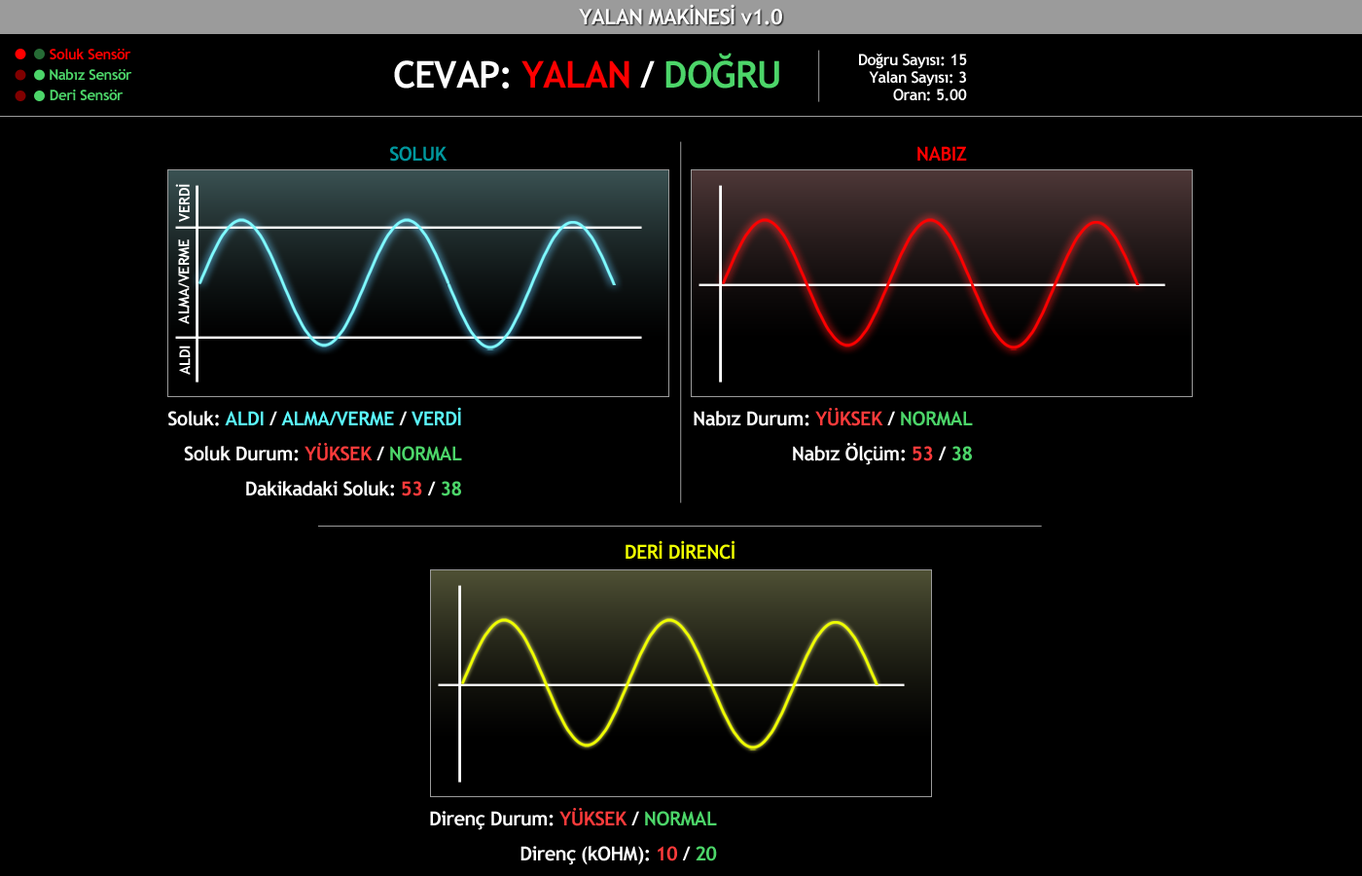
<style>
.page{position:relative;width:1362px;height:876px;background:#000000}
.page>*{position:absolute;margin:0}
.t1{font:21.4px "TrebuchetMS-Bold";letter-spacing:-0.03em;color:#ffffff}
.t2{font:14.6px "TrebuchetMS-Bold";letter-spacing:-0.03em;color:#ff0000}
.t3{font:37px "TrebuchetMS-Bold";letter-spacing:-0.03em;color:#ffffff}
.t4{font:37px "TrebuchetMS-Bold";letter-spacing:-0.03em;color:#fe0000}
.t5{font:37px "TrebuchetMS-Bold";letter-spacing:-0.03em;color:#4cd569}
.t6{font:15.6px/17.5px "TrebuchetMS-Bold";letter-spacing:-0.03em;color:#ffffff}
.t7{font:14.6px "TrebuchetMS-Bold";letter-spacing:-0.03em;color:#4cd569}
.t8{font:19.5px "TrebuchetMS-Bold";letter-spacing:-0.03em;color:#00979d}
.t9{font:19.5px "TrebuchetMS-Bold";letter-spacing:-0.03em;color:#ff0000}
.t10{font:14.6px "TrebuchetMS-Bold";letter-spacing:-0.03em;color:#ffffff}
.t11{font:19.5px/17.5px "TrebuchetMS-Bold";letter-spacing:-0.03em;color:#ffffff}
.t12{font:19.5px/17.5px "TrebuchetMS-Bold";letter-spacing:-0.03em;color:#5af9ff}
.t13{font:19.5px/17.5px "TrebuchetMS-Bold";letter-spacing:-0.03em;color:#ff3b3b}
.t14{font:19.5px/17.5px "TrebuchetMS-Bold";letter-spacing:-0.03em;color:#4cd569}
.t15{font:19.5px "TrebuchetMS-Bold";letter-spacing:-0.03em;color:#f0ff00}
</style>
<div class="page">
<p class="t1" style="left:579px;top:4px;width:203px;height:21px">YALAN MAKİNESİ v1.0</p>
<p class="t2" style="left:50px;top:48px;width:81px;height:11px">Soluk Sensör</p>
<p class="t3" style="left:394px;top:53px;width:385px;height:36px">CEVAP: <span class="t4">YALAN</span> / <span class="t5">DOĞRU</span></p>
<p class="t6" style="left:859px;top:54px;width:108px;height:47px;text-align:right">Doğru Sayısı: 15<br>Yalan Sayısı: 3<br>Oran: 5.00</p>
<p class="t7" style="left:50px;top:68px;width:82px;height:12px">Nabız Sensör</p>
<p class="t7" style="left:50px;top:89px;width:74px;height:11px">Deri Sensör</p>
<p class="t8" style="left:390px;top:146px;width:57px;height:15px">SOLUK</p>
<p class="t9" style="left:917px;top:146px;width:50px;height:15px">NABIZ</p>
<p class="t10" style="left:175px;top:184px;width:15px;height:38px;rotate:-90deg">VERDİ</p>
<p class="t10" style="left:178px;top:239px;width:12px;height:85px;rotate:-90deg">ALMA/VERME</p>
<p class="t10" style="left:179px;top:345px;width:12px;height:30px;rotate:-90deg">ALDI</p>
<p class="t11" style="left:168px;top:407px;width:294px;height:89px;text-align:right">Soluk: <span class="t12">ALDI </span>/<span class="t12"> ALMA/VERME </span>/<span class="t12"> VERDİ<br></span><br>Soluk Durum: <span class="t13">YÜKSEK </span>/ <span class="t14">NORMAL<br></span><br>Dakikadaki Soluk: <span class="t13">53 </span>/ <span class="t14">38</span></p>
<p class="t11" style="left:694px;top:408px;width:279px;height:57px;text-align:right">Nabız Durum: <span class="t13">YÜKSEK </span>/ <span class="t14">NORMAL<br></span><br>Nabız Ölçüm: <span class="t13">53 </span>/ <span class="t14">38</span></p>
<p class="t15" style="left:626px;top:540px;width:108px;height:19px">DERİ DİRENCİ</p>
<p class="t11" style="left:430px;top:807px;width:287px;height:58px;text-align:right">Direnç Durum: <span class="t13">YÜKSEK </span>/ <span class="t14">NORMAL<br></span><br>Direnç (kOHM): <span class="t13">10 </span>/ <span class="t14">20</span></p>
</div>
